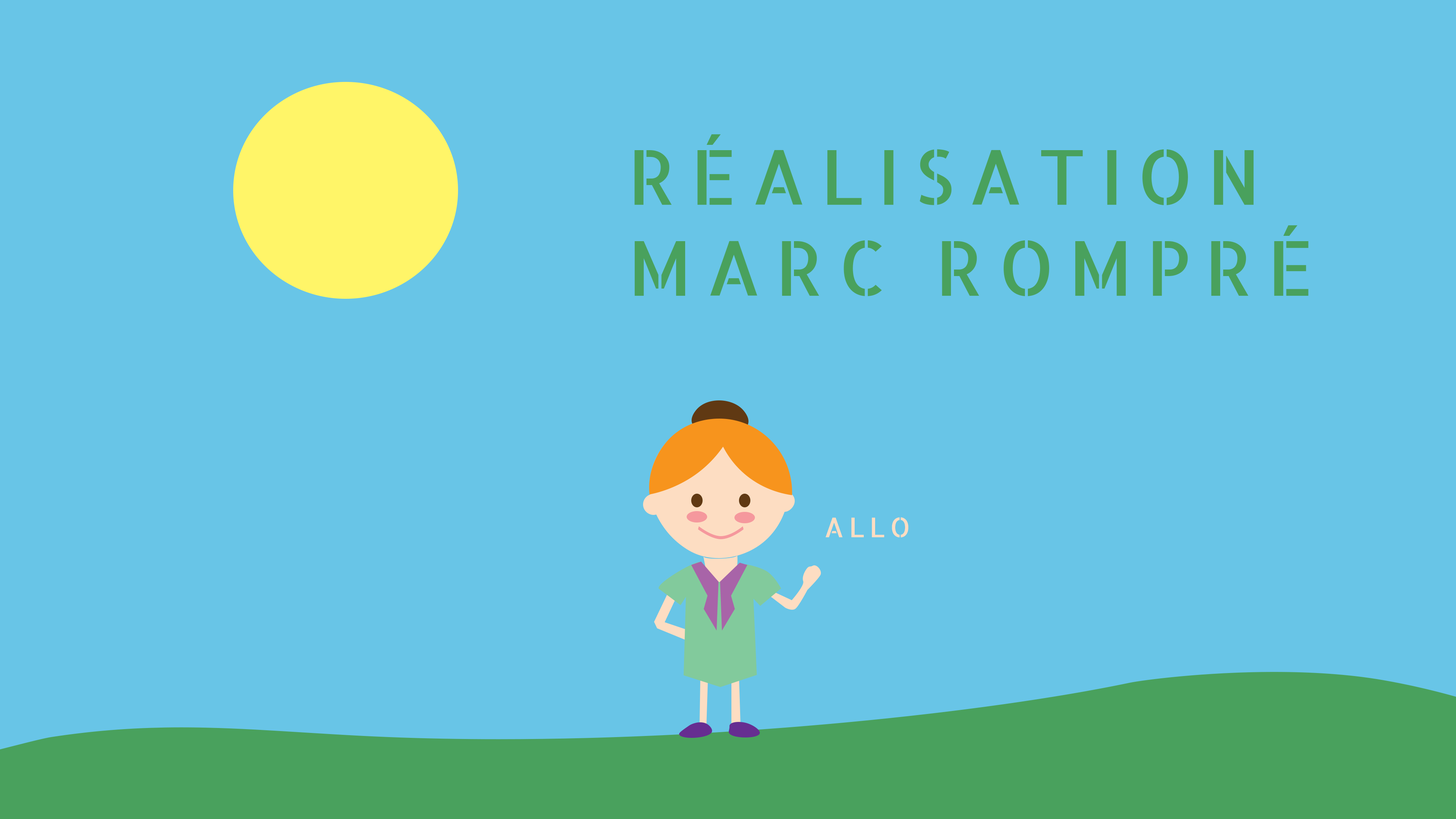
<style>
.page{position:relative;width:1456px;height:819px;background:#68c5e7}
.page>*{position:absolute;margin:0}
.t1{font:75.8px "AllertaStencil-Regular";letter-spacing:0.18em;color:#49a15d}
.t2{font:27.3px "AllertaStencil-Regular";letter-spacing:0.18em;color:#fdddc2}
</style>
<div class="page">
<p class="t1" style="left:634px;top:134px;width:674px;height:162px">RÉALISATION<br>MARC ROMPRÉ</p>
<p class="t2" style="left:825px;top:517px;width:83px;height:21px">ALLO</p>
</div>
